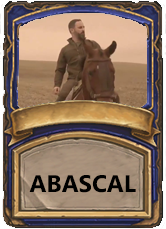
<style>
.page{position:relative;width:166px;height:229px}
.page>*{position:absolute;margin:0}
.t1{font:24px "MicrosoftTaiLe-Bold";color:#000000}
</style>
<div class="page">
<p class="t1" style="left:29px;top:175px;width:107px;height:18px">ABASCAL</p>
</div>
